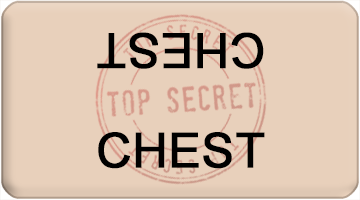
<style>
.page{position:relative;width:360px;height:200px;background:#e8d0bb}
.page>*{position:absolute;margin:0}
.t1{font:48px "ArialMT";color:#000000;font-weight:bold}
</style>
<div class="page">
<p class="t1" style="left:97px;top:32px;width:167px;height:37px;rotate:180deg">CHEST</p>
<p class="t1" style="left:98px;top:132px;width:167px;height:37px">CHEST</p>
</div>
